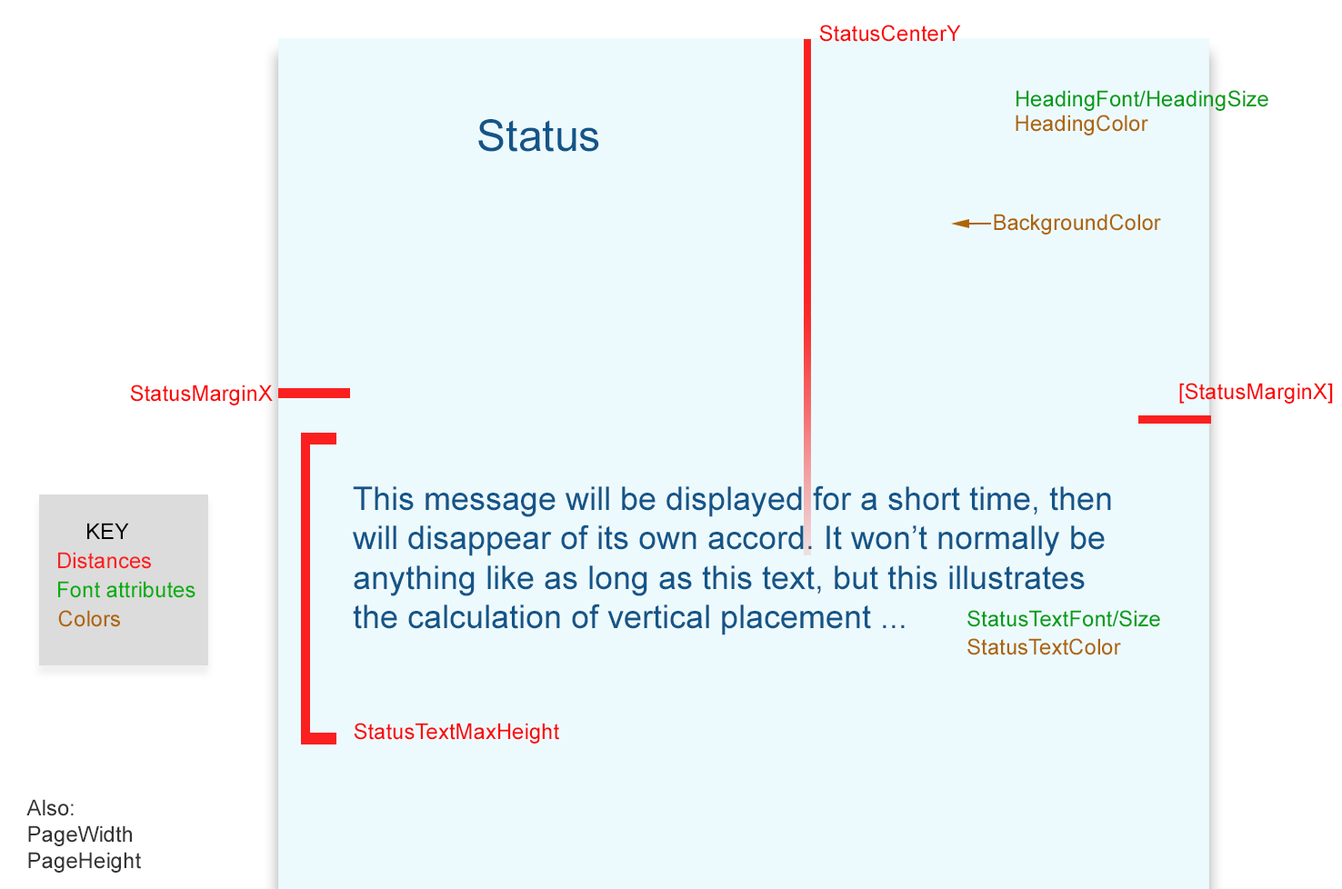
<style>
.page{position:relative;width:1342px;height:889px;background:#edfafd}
.page>*{position:absolute;margin:0}
.t1{font:21.8px "ArialMT";color:#fc0707}
.t2{font:21.8px "ArialMT";color:#039d18}
.t3{font:43.6px "ArialMT";color:#135589}
.t4{font:21.8px "ArialMT";color:#ae6505}
.t5{font:32.7px "ArialMT";color:#135589}
.t6{font:21.8px "ArialMT";color:#000000}
.t7{font:21.8px "ArialMT";color:#fa2020}
.t8{font:21.8px "ArialMT";color:#05ad0e}
.t9{font:21.8px "ArialMT";color:#343434}
</style>
<div class="page">
<p class="t1" style="left:819px;top:25px;width:142px;height:17px">StatusCenterY</p>
<p class="t2" style="left:1016px;top:90px;width:252px;height:21px">HeadingFont/HeadingSize</p>
<p class="t3" style="left:478px;top:119px;width:121px;height:33px">Status</p>
<p class="t4" style="left:1015px;top:115px;width:133px;height:20px">HeadingColor</p>
<p class="t4" style="left:993px;top:214px;width:168px;height:20px">BackgroundColor</p>
<p class="t1" style="left:130px;top:384px;width:143px;height:21px">StatusMarginX</p>
<p class="t1" style="left:1179px;top:383px;width:153px;height:21px">[StatusMarginX]</p>
<p class="t5" style="left:353px;top:485px;width:758px;height:150px">This message will be displayed for a short time, then will disappear of its own accord. It won’t normally be anything like as long as this text, but this illustrates the calculation of vertical placement ...</p>
<p class="t6" style="left:87px;top:523px;width:42px;height:16px">KEY</p>
<p class="t7" style="left:58px;top:552px;width:93px;height:17px">Distances</p>
<p class="t8" style="left:58px;top:581px;width:137px;height:17px">Font attributes</p>
<p class="t4" style="left:58px;top:610px;width:62px;height:17px">Colors</p>
<p class="t2" style="left:967px;top:610px;width:193px;height:17px">StatusTextFont/Size</p>
<p class="t4" style="left:967px;top:638px;width:154px;height:17px">StatusTextColor</p>
<p class="t1" style="left:354px;top:723px;width:205px;height:20px">StatusTextMaxHeight</p>
<p class="t9" style="left:26px;top:799px;width:115px;height:74px">Also:<br>PageWidth<br>PageHeight</p>
</div>
